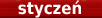
<style>
.page{position:relative;width:102px;height:18px}
.page>*{position:absolute;margin:0}
.t1{font:16.7px "DejaVuSansCondensed-Bold";color:#ffffff}
</style>
<div class="page">
<p class="t1" style="left:18px;top:0px;width:63px;height:18px">styczeń</p>
</div>
